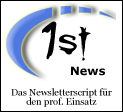
<style>
.page{position:relative;width:123px;height:112px;background:#ffffff}
.page>*{position:absolute;margin:0}
.t1{font:9.3px/9.3px "Georgia";color:#000000}
</style>
<div class="page">
<p class="t1" style="left:11px;top:88px;width:101px;height:19px;text-align:center">Das Newsletterscript für<br>den prof. Einsatz</p>
</div>
